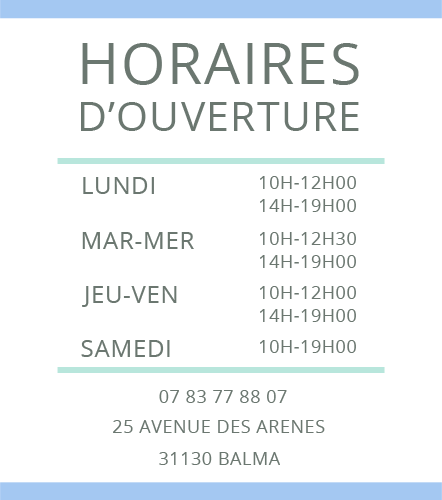
<style>
.page{position:relative;width:442px;height:500px;background:#ffffff}
.page>*{position:absolute;margin:0}
.t1{font:41px/46.6px "OpenSans-Regular";letter-spacing:0.03em;color:#6b7770}
.t2{font:57px/46.6px "OpenSans-Regular";letter-spacing:0.03em;color:#6b7770}
.t3{font:24px "OpenSans-Regular";letter-spacing:0.03em;color:#6b7770}
.t4{font:18px/23px "OpenSans-Regular";letter-spacing:0.03em;color:#6b7770}
.t5{font:18px "OpenSans-Regular";letter-spacing:0.03em;color:#6b7770}
</style>
<div class="page">
<p class="t1" style="left:81px;top:43px;width:278px;height:88px"><span class="t2">HORAIRES<br></span>D’OUVERTURE</p>
<p class="t3" style="left:83px;top:177px;width:71px;height:17px">LUNDI</p>
<p class="t4" style="left:260px;top:176px;width:96px;height:36px">10H-12H00<br>14H-19H00</p>
<p class="t3" style="left:82px;top:232px;width:112px;height:17px">MAR-MER</p>
<p class="t4" style="left:260px;top:232px;width:96px;height:36px">10H-12H30<br>14H-19H00</p>
<p class="t3" style="left:82px;top:286px;width:95px;height:21px">JEU-VEN</p>
<p class="t4" style="left:260px;top:286px;width:96px;height:36px">10H-12H00<br>14H-19H00</p>
<p class="t3" style="left:81px;top:340px;width:89px;height:17px">SAMEDI</p>
<p class="t5" style="left:260px;top:340px;width:96px;height:13px">10H-19H00</p>
<p class="t5" style="left:159px;top:390px;width:128px;height:13px">07 83 77 88 07</p>
<p class="t5" style="left:113px;top:420px;width:212px;height:13px">25 AVENUE DES ARENES</p>
<p class="t5" style="left:159px;top:452px;width:121px;height:13px">31130 BALMA</p>
</div>
